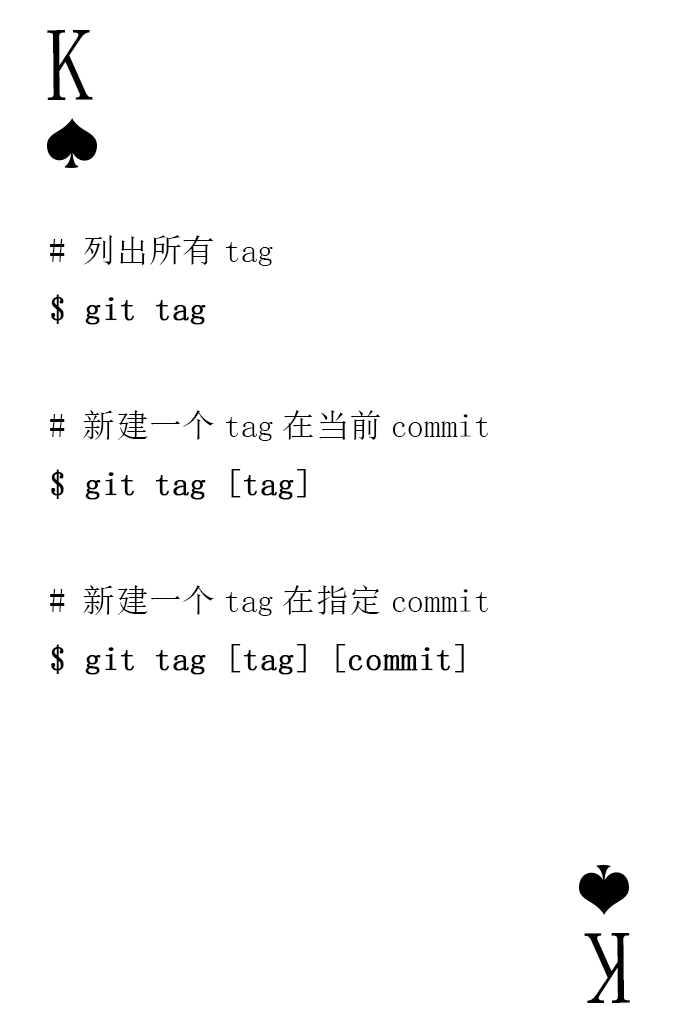
<style>
.page{position:relative;width:673px;height:1028px;background:#ffffff}
.page>*{position:absolute;margin:0}
.t1{font:104.2px "SimSun-ExtB";color:#010101;scale:0.93 1}
.t2{font:33.3px "SimSun";color:#000000;font-weight:bold}
.t3{font:33.3px "SimSun";color:#000000}
.t4{font:104.2px "SimSun-ExtB";letter-spacing:-0.14em;color:#010101;scale:0.93 1}
</style>
<div class="page">
<p class="t1" style="left:47px;top:30px;width:46px;height:70px">K</p>
<p class="t2" style="left:50px;top:235px;width:438px;height:440px"><span class="t3"># 列出所有tag<br></span>$ git tag<br><span class="t3"><br># 新建一个tag在当前commit<br></span>$ git tag [tag]<br><span class="t3"><br># 新建一个tag在指定commit<br></span>$ git tag [tag] [commit]</p>
<p class="t4" style="left:584px;top:933px;width:46px;height:70px;rotate:180deg">K</p>
</div>
